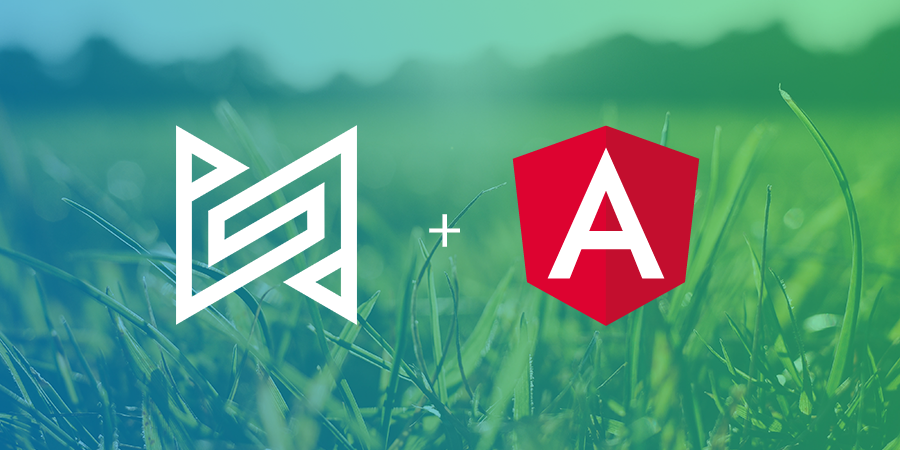
<style>
.page{position:relative;width:900px;height:450px}
.page>*{position:absolute;margin:0}
.t1{font:100px "Raleway-Light";letter-spacing:0.025em;color:#ffffff}
</style>
<div class="page">
<p class="t1" style="left:429px;top:214px;width:31px;height:33px">+</p>
</div>
